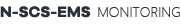
<style>
.page{position:relative;width:180px;height:24px;background:#ffffff}
.page>*{position:absolute;margin:0}
.t1{font:15.5px "GalanoGrotesque-Bold";color:#2a3139}
</style>
<div class="page">
<p class="t1" style="left:0px;top:6px;width:91px;height:12px">N-SCS-EMS</p>
</div>
